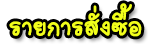
<style>
.page{position:relative;width:150px;height:44px;background:#ffffff}
.page>*{position:absolute;margin:0}
.t1{font:39.6px "2005_iannnnnMTV";color:#f2ff1b}
</style>
<div class="page">
<p class="t1" style="left:9px;top:3px;width:133px;height:34px">รายการสั่งซื้อ</p>
</div>
